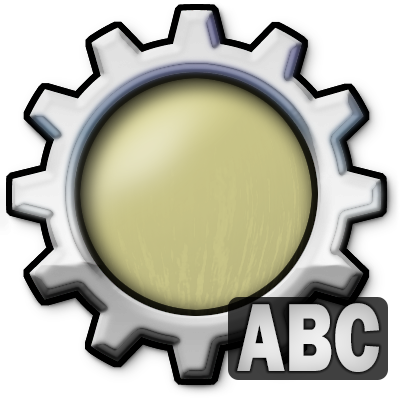
<style>
.page{position:relative;width:400px;height:400px;background:#ffffff}
.page>*{position:absolute;margin:0}
.t1{font:100px "FranklinGothic-Heavy";color:#ffffff}
</style>
<div class="page">
<p class="t1" style="left:237px;top:303px;width:142px;height:69px">ABC</p>
</div>
